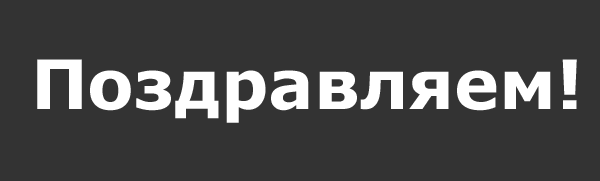
<style>
.page{position:relative;width:600px;height:181px;background:#333333}
.page>*{position:absolute;margin:0}
.t1{font:67.9px "Verdana-Bold";color:#ffffff}
</style>
<div class="page">
<p class="t1" style="left:37px;top:59px;width:540px;height:64px">Поздравляем!</p>
</div>
